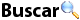
<style>
.page{position:relative;width:80px;height:20px;background:#ffffff}
.page>*{position:absolute;margin:0}
.t1{font:20px "MyriadPro-Bold";color:#000000}
</style>
<div class="page">
<p class="t1" style="left:2px;top:3px;width:57px;height:14px">Buscar</p>
</div>
